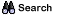
<style>
.page{position:relative;width:64px;height:16px;background:#ffffff}
.page>*{position:absolute;margin:0}
.t1{font:10px "ArialRoundedMTBold";color:#000000}
</style>
<div class="page">
<p class="t1" style="left:18px;top:4px;width:34px;height:8px">Search</p>
</div>
